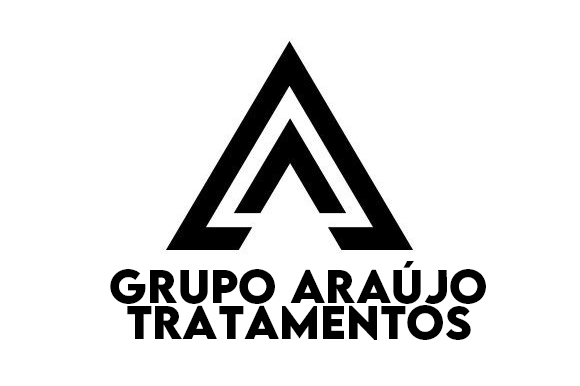
<style>
.page{position:relative;width:580px;height:386px;background:#ffffff}
.page>*{position:absolute;margin:0}
.t1{font:41.6px/36.1px "LEMONMILK-Bold";color:#000000}
</style>
<div class="page">
<p class="t1" style="left:110px;top:261px;width:376px;height:79px;text-align:center">GRUPO ARAÚJO<br>TRATAMENTOS</p>
</div>
